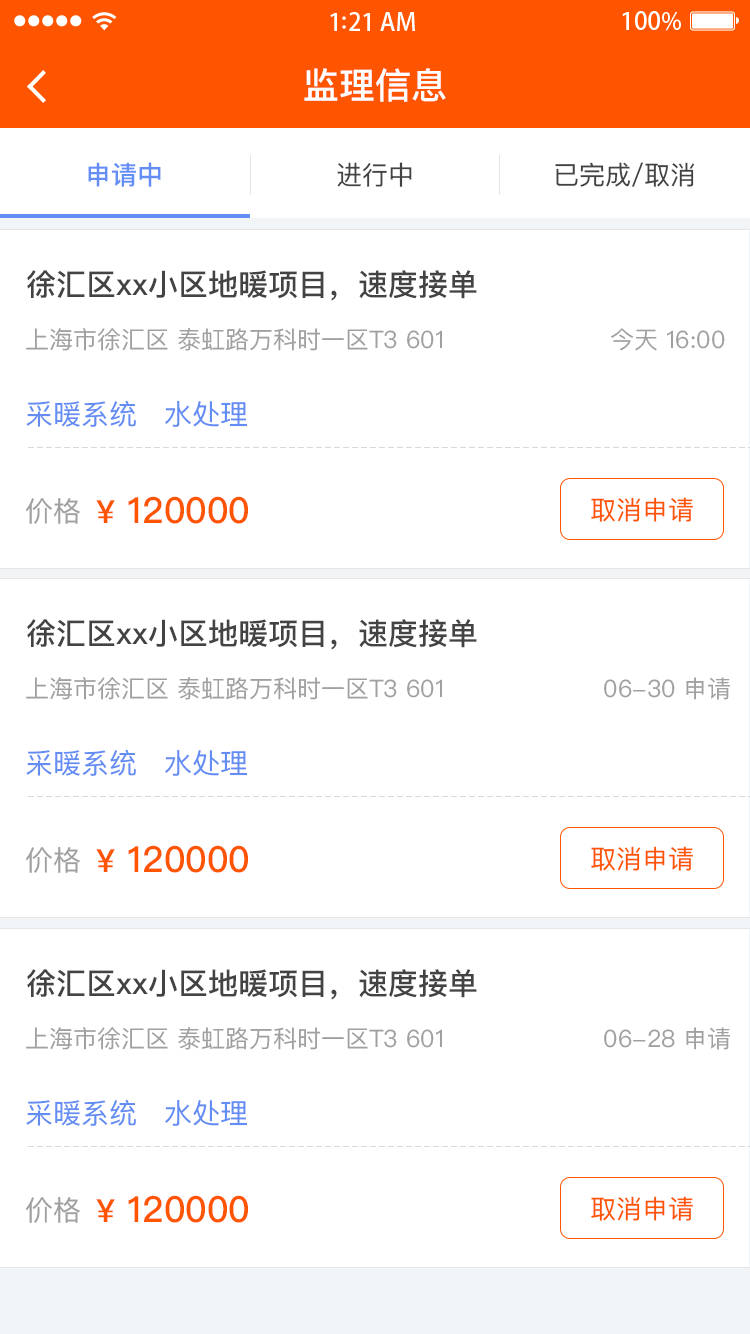
<style>
.page{position:relative;width:750px;height:1334px;background:#ffffff}
.page>*{position:absolute;margin:0}
.t1{font:36px "PingFangSC-Medium";color:#ffffff}
.t2{font:26px "PingFangSC-Medium";color:#648df6}
.t3{font:26px "PingFangSC-Regular";color:#434343}
.t4{font:30px "PingFangSC-Medium";color:#434343}
.t5{font:24px "PingFangSC-Regular";color:#a0a0a0}
.t6{font:28px "PingFangSC-Regular";color:#648df4}
.t7{font:36px "PingFangSC-Medium";color:#ff5400}
.t8{font:32px "PingFangSC-Medium";color:#ff5400}
.t9{font:26px "PingFangSC-Regular";color:#ff5400}
.t10{font:28px "PingFangSC-Regular";color:#a0a0a0}
</style>
<div class="page">
<p class="t1" style="left:304px;top:68px;width:142px;height:34px">监理信息</p>
<p class="t2" style="left:88px;top:162px;width:73px;height:25px">申请中</p>
<p class="t3" style="left:337px;top:162px;width:75px;height:25px">进行中</p>
<p class="t3" style="left:555px;top:162px;width:140px;height:25px">已完成/取消</p>
<p class="t4" style="left:27px;top:270px;width:450px;height:31px">徐汇区xx小区地暖项目，速度接单</p>
<p class="t5" style="left:26px;top:328px;width:416px;height:23px">上海市徐汇区 泰虹路万科时一区T3 601</p>
<p class="t5" style="left:611px;top:328px;width:114px;height:23px">今天 16:00</p>
<p class="t6" style="left:26px;top:400px;width:110px;height:27px">采暖系统</p>
<p class="t6" style="left:165px;top:400px;width:82px;height:27px">水处理</p>
<p class="t7" style="left:96px;top:496px;width:152px;height:28px"><span class="t8">¥</span> 120000</p>
<p class="t9" style="left:591px;top:497px;width:102px;height:25px">取消申请</p>
<p class="t10" style="left:26px;top:498px;width:54px;height:26px">价格</p>
<p class="t4" style="left:27px;top:619px;width:450px;height:31px">徐汇区xx小区地暖项目，速度接单</p>
<p class="t5" style="left:26px;top:677px;width:416px;height:23px">上海市徐汇区 泰虹路万科时一区T3 601</p>
<p class="t5" style="left:604px;top:677px;width:126px;height:23px">06-30 申请</p>
<p class="t6" style="left:26px;top:749px;width:110px;height:27px">采暖系统</p>
<p class="t6" style="left:165px;top:749px;width:82px;height:27px">水处理</p>
<p class="t7" style="left:96px;top:845px;width:152px;height:28px"><span class="t8">¥</span> 120000</p>
<p class="t9" style="left:591px;top:846px;width:102px;height:25px">取消申请</p>
<p class="t10" style="left:26px;top:847px;width:54px;height:26px">价格</p>
<p class="t4" style="left:27px;top:969px;width:450px;height:31px">徐汇区xx小区地暖项目，速度接单</p>
<p class="t5" style="left:26px;top:1027px;width:416px;height:23px">上海市徐汇区 泰虹路万科时一区T3 601</p>
<p class="t5" style="left:604px;top:1027px;width:126px;height:23px">06-28 申请</p>
<p class="t6" style="left:26px;top:1099px;width:110px;height:27px">采暖系统</p>
<p class="t6" style="left:165px;top:1099px;width:82px;height:27px">水处理</p>
<p class="t10" style="left:26px;top:1197px;width:54px;height:26px">价格</p>
<p class="t7" style="left:96px;top:1195px;width:152px;height:28px"><span class="t8">¥</span> 120000</p>
<p class="t9" style="left:591px;top:1196px;width:102px;height:25px">取消申请</p>
</div>
